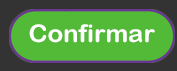
<style>
.page{position:relative;width:177px;height:71px;background:#52ba36}
.page>*{position:absolute;margin:0}
.t1{font:24.3px "ArialRoundedMTBold";color:#ffffff;scale:1.06 1}
</style>
<div class="page">
<p class="t1" style="left:29px;top:24px;width:126px;height:19px">Confirmar</p>
</div>
